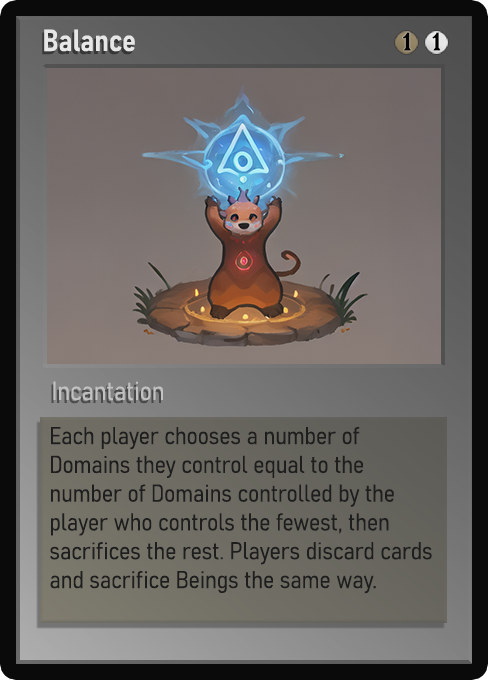
<style>
.page{position:relative;width:488px;height:680px}
.page>*{position:absolute;margin:0}
.t1{font:30px "Bahnschrift-SemiBoldSemiCondensed";color:#f2f2f2;font-weight:bold}
.t2{font:25px "WTRRoycroft";color:#000000;font-weight:bold;scale:1.09 1}
.t3{font:26px "Bahnschrift-LightSemiCondensed";color:#c8c8c8;font-weight:bold}
.t4{font:24px "Bahnschrift-LightSemiCondensed";color:#1e1e1e;font-weight:bold}
</style>
<div class="page">
<p class="t1" style="left:44px;top:29px;width:91px;height:23px;opacity:0.9">Balance</p>
<p class="t2" style="left:403px;top:32px;width:8px;height:19px">1</p>
<p class="t2" style="left:432px;top:32px;width:9px;height:19px">1</p>
<p class="t3" style="left:53px;top:381px;width:110px;height:20px;opacity:0.9">Incantation</p>
<p class="t4" style="left:50px;top:427px;width:382px;height:167px">Each player chooses a number of Domains they control equal to the number of Domains controlled by the player who controls the fewest, then sacrifices the rest. Players discard cards and sacrifice Beings the same way.</p>
</div>
